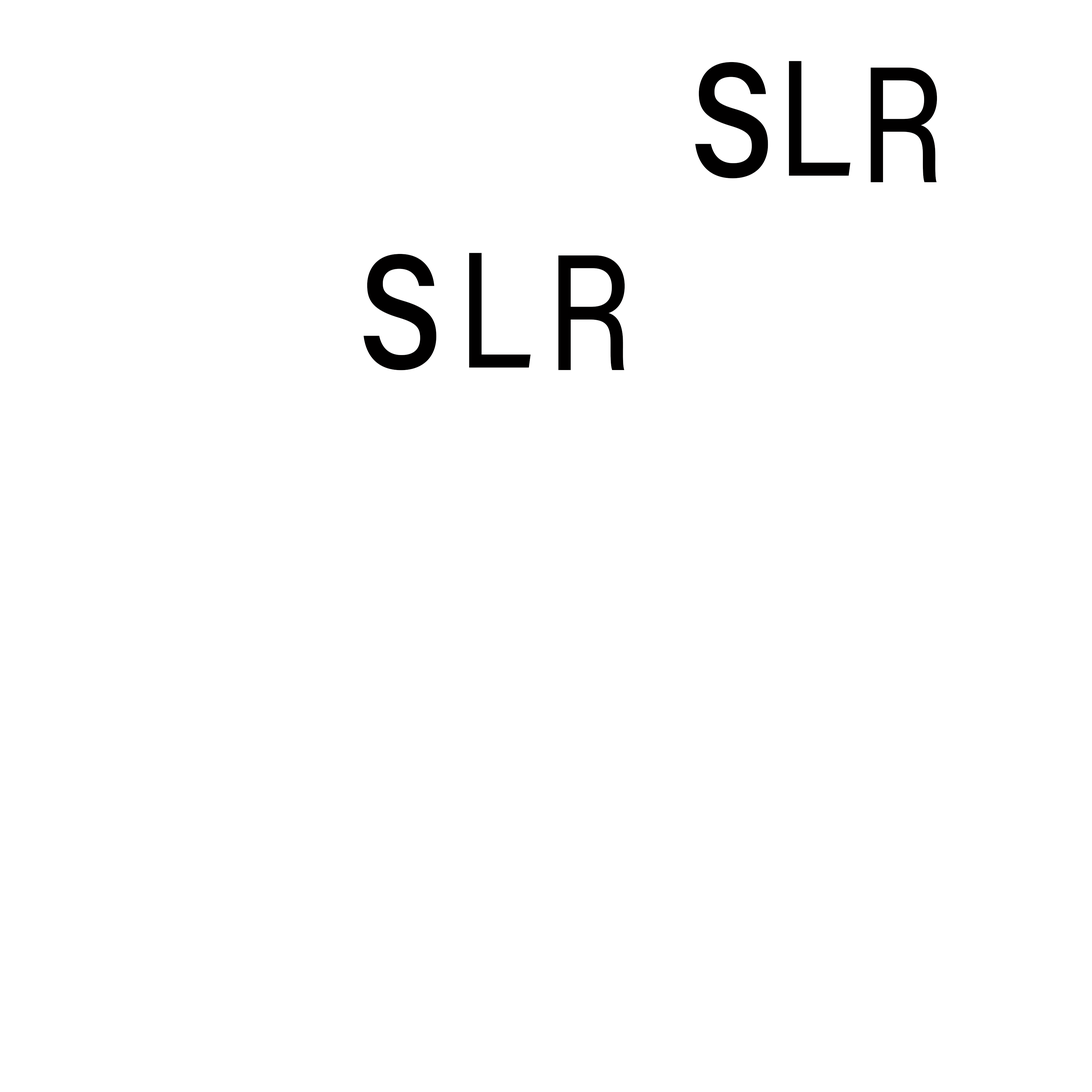
<style>
.page{position:relative;width:1092px;height:1092px;background:#ffffff}
.page>*{position:absolute;margin:0}
.t1{font:218.8px "AcuminConcept-Regular";letter-spacing:0.1em;color:#010000;font-weight:bold;scale:0.82 1}
.t2{font:135px "AcuminConcept-Regular";letter-spacing:0.1em;color:#010000;font-weight:bold;scale:1.22 1}
.t3{font:164.7px "AcuminConcept-Regular";letter-spacing:0.1em;color:#010000;font-weight:bold;scale:0.82 1}
</style>
<div class="page">
<p class="t1" style="left:695px;top:62px;width:73px;height:116px">s</p>
<p class="t2" style="left:789px;top:61px;width:62px;height:115px">L</p>
<p class="t3" style="left:870px;top:67px;width:67px;height:115px">R</p>
<p class="t1" style="left:363px;top:254px;width:73px;height:116px">s</p>
<p class="t2" style="left:469px;top:253px;width:62px;height:115px">L</p>
<p class="t3" style="left:558px;top:255px;width:67px;height:115px">R</p>
</div>
